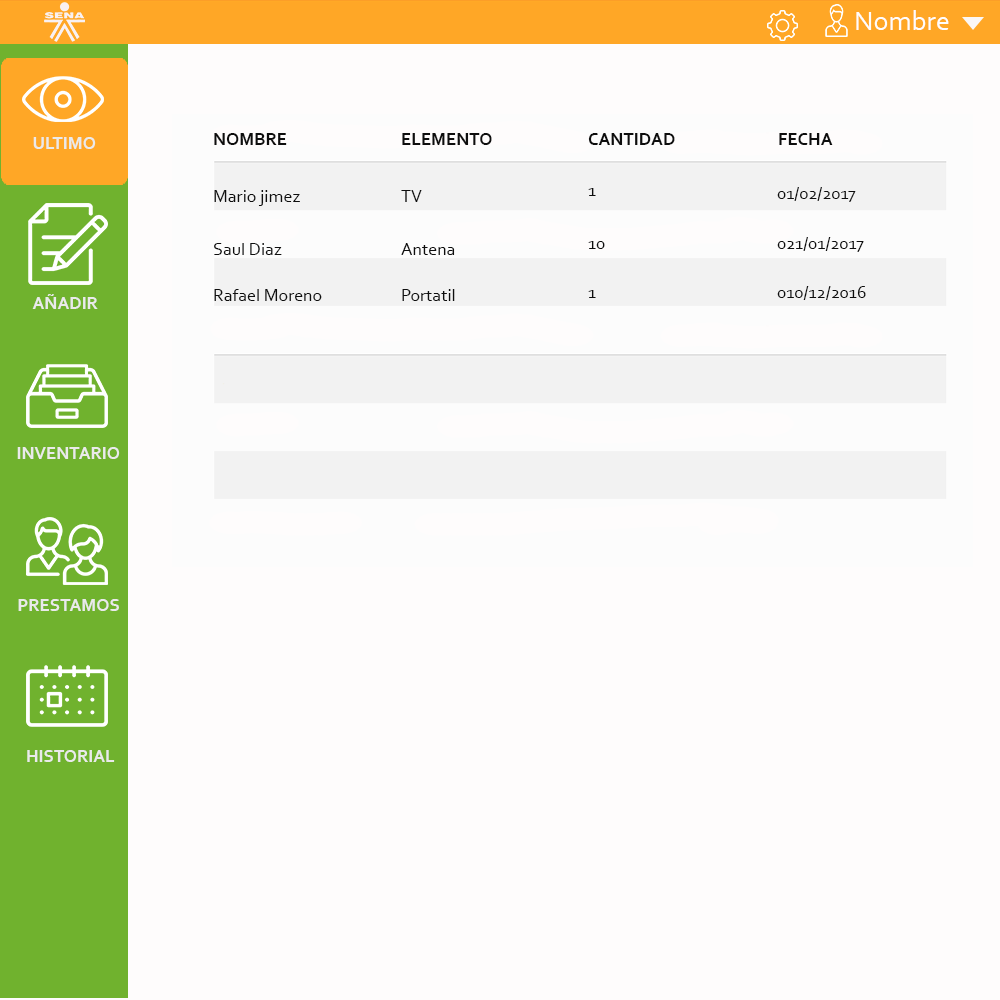
<style>
.page{position:relative;width:1000px;height:1000px;background:#fefcfc}
.page>*{position:absolute;margin:0}
.t1{font:28px "Corbel";color:#fffdfc}
.t2{font:18px "Corbel-Bold";color:#eaeaea}
.t3{font:18px "Corbel-Bold";color:#0e0e0e}
.t4{font:18px "Corbel";color:#0e0e0e}
</style>
<div class="page">
<p class="t1" style="left:856px;top:10px;width:93px;height:20px">Nombre</p>
<p class="t2" style="left:33px;top:137px;width:63px;height:12px">ULTIMO</p>
<p class="t3" style="left:214px;top:133px;width:73px;height:12px">NOMBRE</p>
<p class="t3" style="left:402px;top:133px;width:90px;height:12px">ELEMENTO</p>
<p class="t3" style="left:588px;top:133px;width:87px;height:12px">CANTIDAD</p>
<p class="t3" style="left:779px;top:133px;width:54px;height:12px">FECHA</p>
<p class="t4" style="left:214px;top:190px;width:86px;height:16px">Mario jimez</p>
<p class="t4" style="left:401px;top:190px;width:21px;height:12px">TV</p>
<p class="t4" style="left:588px;top:188px;width:8px;height:8px">1</p>
<p class="t4" style="left:777px;top:187px;width:79px;height:15px">01/02/2017</p>
<p class="t4" style="left:214px;top:243px;width:68px;height:12px">Saul Diaz</p>
<p class="t4" style="left:401px;top:243px;width:54px;height:12px">Antena</p>
<p class="t4" style="left:588px;top:241px;width:17px;height:8px">10</p>
<p class="t4" style="left:777px;top:237px;width:87px;height:15px">021/01/2017</p>
<p class="t2" style="left:32px;top:294px;width:66px;height:15px">AÑADIR<br>VV</p>
<p class="t4" style="left:214px;top:289px;width:108px;height:12px">Rafael Moreno</p>
<p class="t4" style="left:402px;top:289px;width:53px;height:12px">Portatil</p>
<p class="t4" style="left:588px;top:290px;width:8px;height:8px">1</p>
<p class="t4" style="left:777px;top:286px;width:89px;height:14px">010/12/2016</p>
<p class="t2" style="left:17px;top:447px;width:103px;height:12px">INVENTARIO</p>
<p class="t2" style="left:18px;top:599px;width:101px;height:12px">PRESTAMOS<br>V</p>
<p class="t2" style="left:27px;top:750px;width:88px;height:12px">HISTORIAL<br><br>LLLL</p>
</div>
